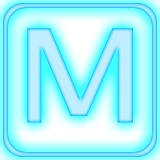
<style>
.page{position:relative;width:160px;height:160px}
.page>*{position:absolute;margin:0}
.t1{font:130px "LucidaSans";scale:1.2 1}
</style>
<div class="page">
<p class="t1" style="left:27px;top:28px;width:106px;height:95px">M</p>
</div>
